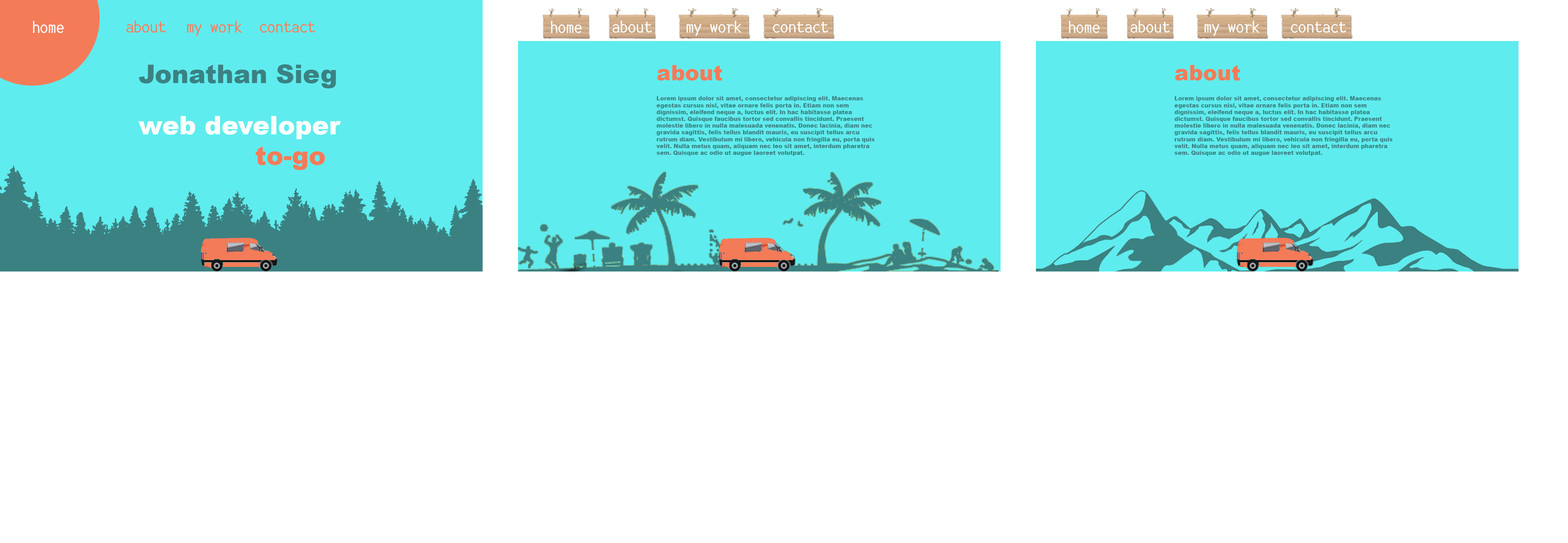
<style>
.page{position:relative;width:1568px;height:543px;background:#ffffff}
.page>*{position:absolute;margin:0}
.t1{font:17px "IckyTicketMono";color:#ffffff}
.t2{font:17px "IckyTicketMono";color:#f47b58}
.t3{font:25.4px "Arial-Black";color:#3b8182}
.t4{font:5.7px "Arial-Black";color:#3b8182}
.t5{font:21.2px "Arial-Black";color:#f47b58}
.t6{font:25.4px "Arial-Black";color:#ffffff}
.t7{font:25.4px "Arial-Black";color:#f47b58}
</style>
<div class="page">
<p class="t1" style="left:33px;top:21px;width:31px;height:12px">home</p>
<p class="t2" style="left:126px;top:20px;width:40px;height:13px">about</p>
<p class="t2" style="left:187px;top:20px;width:55px;height:16px">my work</p>
<p class="t2" style="left:260px;top:22px;width:56px;height:11px">contact</p>
<p class="t1" style="left:551px;top:21px;width:31px;height:12px">home</p>
<p class="t1" style="left:612px;top:20px;width:40px;height:13px">about</p>
<p class="t1" style="left:686px;top:20px;width:56px;height:16px">my work</p>
<p class="t1" style="left:773px;top:22px;width:56px;height:11px">contact</p>
<p class="t1" style="left:1069px;top:21px;width:31px;height:12px">home</p>
<p class="t1" style="left:1130px;top:20px;width:40px;height:13px">about</p>
<p class="t1" style="left:1204px;top:20px;width:56px;height:16px">my work</p>
<p class="t1" style="left:1291px;top:22px;width:55px;height:11px">contact</p>
<p class="t3" style="left:139px;top:64px;width:197px;height:24px">Jonathan Sieg</p>
<p class="t4" style="left:656px;top:65px;width:219px;height:91px"><span class="t5">about<br></span><br><br>Lorem ipsum dolor sit amet, consectetur adipiscing elit. Maecenas egestas cursus nisl, vitae ornare felis porta in. Etiam non sem dignissim, eleifend neque a, luctus elit. In hac habitasse platea dictumst. Quisque faucibus tortor sed convallis tincidunt. Praesent molestie libero in nulla malesuada venenatis. Donec lacinia, diam nec gravida sagittis, felis tellus blandit mauris, eu suscipit tellus arcu rutrum diam. Vestibulum mi libero, vehicula non fringilla eu, porta quis velit. Nulla metus quam, aliquam nec leo sit amet, interdum pharetra sem. Quisque ac odio ut augue laoreet volutpat.</p>
<p class="t4" style="left:1174px;top:65px;width:219px;height:91px"><span class="t5">about<br></span><br><br>Lorem ipsum dolor sit amet, consectetur adipiscing elit. Maecenas egestas cursus nisl, vitae ornare felis porta in. Etiam non sem dignissim, eleifend neque a, luctus elit. In hac habitasse platea dictumst. Quisque faucibus tortor sed convallis tincidunt. Praesent molestie libero in nulla malesuada venenatis. Donec lacinia, diam nec gravida sagittis, felis tellus blandit mauris, eu suscipit tellus arcu rutrum diam. Vestibulum mi libero, vehicula non fringilla eu, porta quis velit. Nulla metus quam, aliquam nec leo sit amet, interdum pharetra sem. Quisque ac odio ut augue laoreet volutpat.</p>
<p class="t6" style="left:138px;top:116px;width:203px;height:54px">web developer<br><span class="t7">to-go</span></p>
</div>
